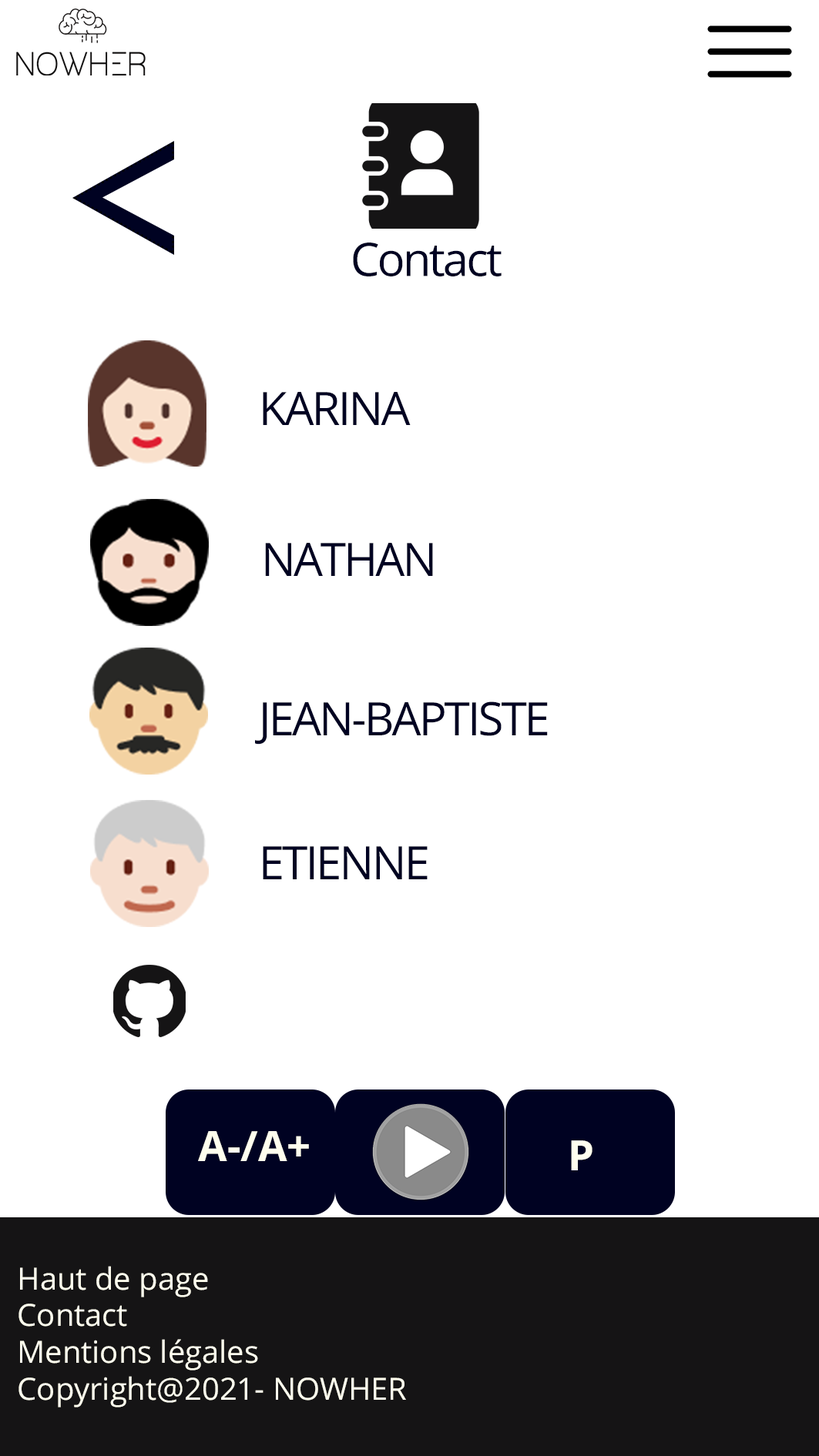
<style>
.page{position:relative;width:819px;height:1456px;background:#ffffff}
.page>*{position:absolute;margin:0}
.t1{font:46.2px "OpenSans-Regular";letter-spacing:-0.05em;color:#000222}
.t2{font:41.8px "OpenSans-Bold";color:#fffeee}
.t3{font:30.6px "OpenSans-Regular";color:#fffeee}
.t4{font:30.5px "OpenSans-Bold";color:#fffeee}
</style>
<div class="page">
<p class="t1" style="left:353px;top:243px;width:148px;height:34px">Contact</p>
<p class="t1" style="left:263px;top:392px;width:148px;height:33px">KARINA</p>
<p class="t1" style="left:265px;top:543px;width:168px;height:33px">NATHAN</p>
<p class="t1" style="left:255px;top:702px;width:293px;height:43px">JEAN-BAPTISTE</p>
<p class="t1" style="left:263px;top:846px;width:164px;height:34px">ETIENNE</p>
<p class="t2" style="left:198px;top:1131px;width:111px;height:30px">A-/A+</p>
<p class="t2" style="left:571px;top:1141px;width:21px;height:30px">P</p>
<p class="t3" style="left:18px;top:1266px;width:388px;height:142px"><span class="t4">     <br>    </span>Haut de page<br>    Contact<br>    Mentions légales<br>    Copyright@2021- NOWHER</p>
</div>
